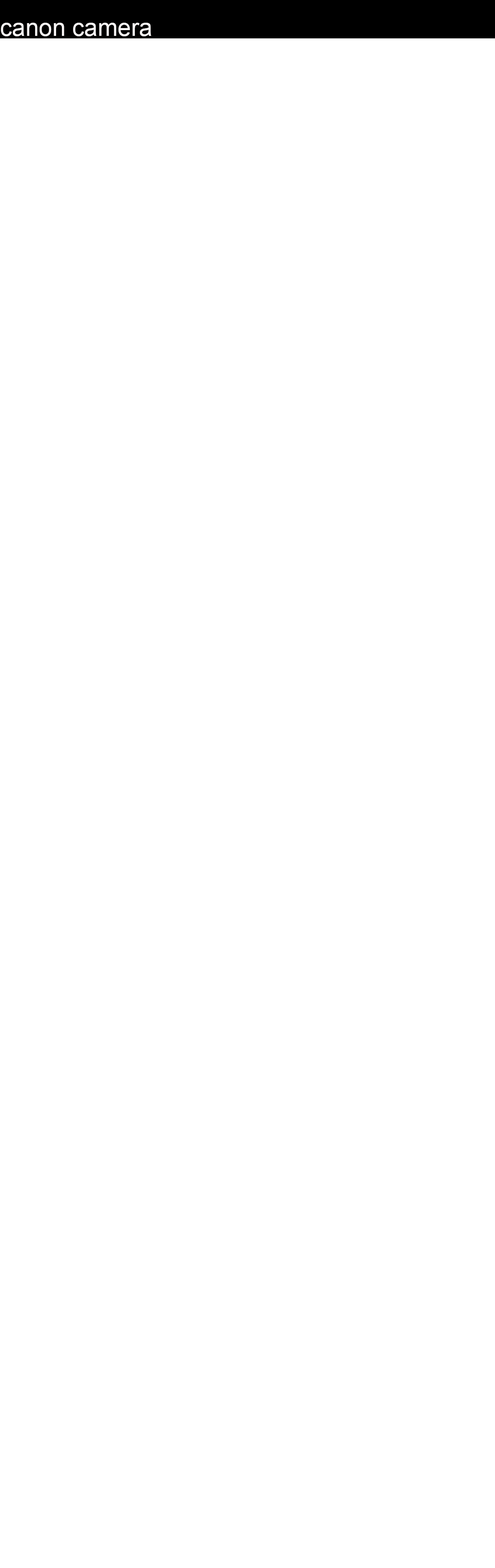
<style>
.page{position:relative;width:495px;height:1568px;background:#ffffff}
.page>*{position:absolute;margin:0}
.t1{font:24.1px "ArialMT";color:#faf7f7}
</style>
<div class="page">
<p class="t1" style="left:1px;top:23px;width:150px;height:13px">canon camera</p>
</div>
